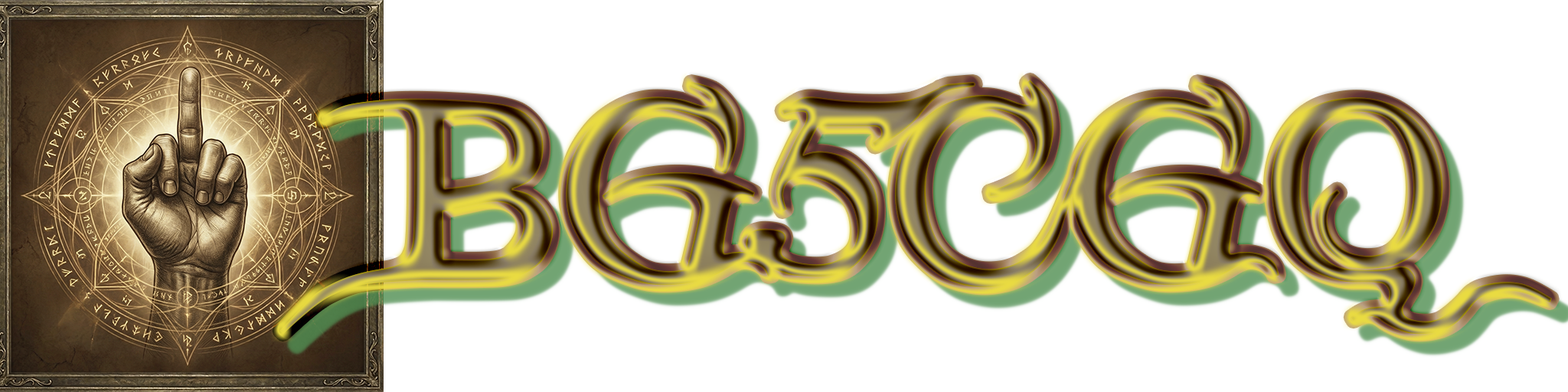
<style>
.page{position:relative;width:1568px;height:392px;background:#ffffff}
.page>*{position:absolute;margin:0}
.t1{font:266.5px "FairydustB";letter-spacing:0.02em;font-weight:bold}
</style>
<div class="page">
<p class="t1" style="left:279px;top:80px;width:1273px;height:255px">BG5CGQ</p>
</div>
